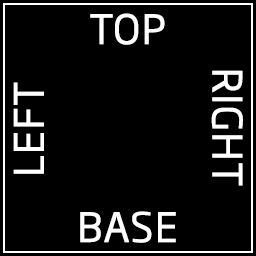
<style>
.page{position:relative;width:256px;height:256px;background:#000000}
.page>*{position:absolute;margin:0}
.t1{font:40px "SohoGothicPro-Regular";color:#ffffff;font-weight:bold}
</style>
<div class="page">
<p class="t1" style="left:90px;top:13px;width:75px;height:32px">TOP</p>
<p class="t1" style="left:211px;top:70px;width:32px;height:116px;rotate:90deg">RIGHT</p>
<p class="t1" style="left:13px;top:82px;width:31px;height:92px;rotate:-90deg">LEFT</p>
<p class="t1" style="left:80px;top:211px;width:96px;height:32px">BASE</p>
</div>
